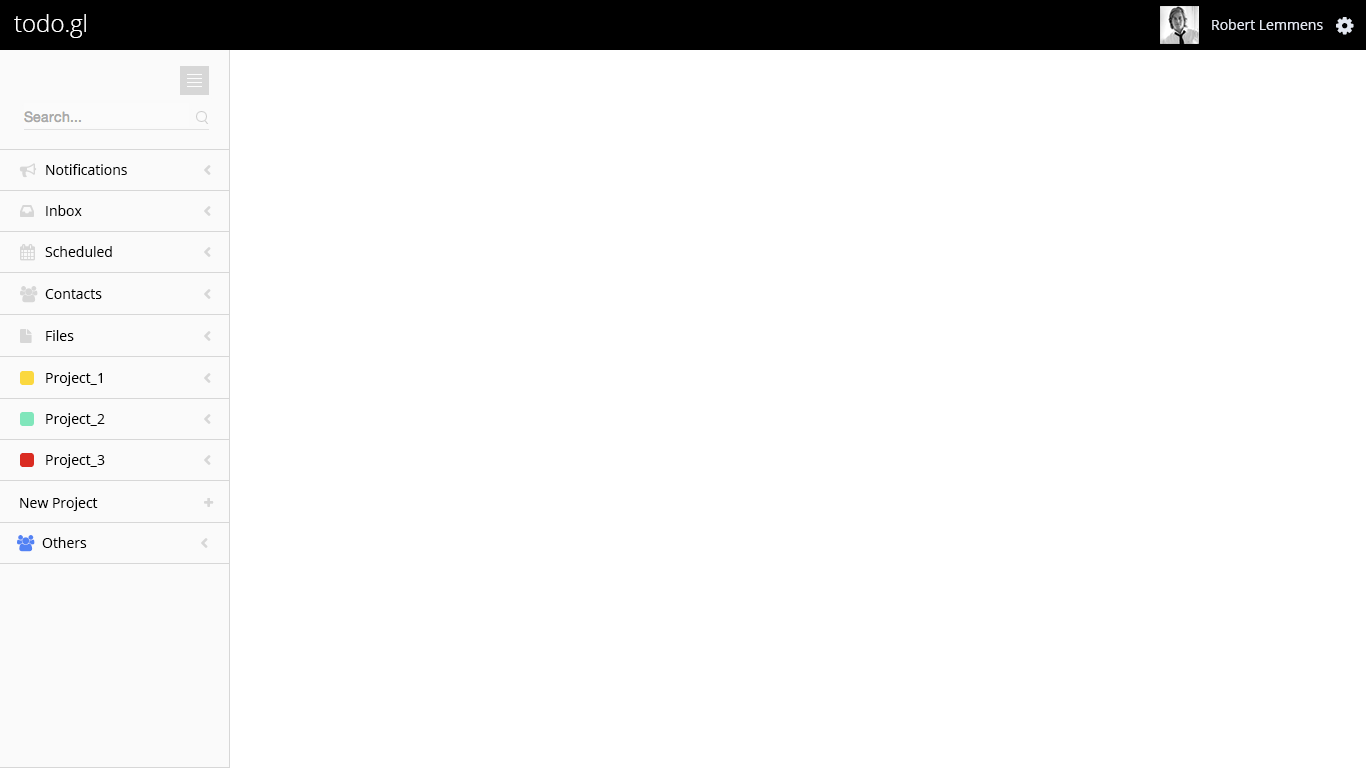
<style>
.page{position:relative;width:1366px;height:768px;background:#ffffff}
.page>*{position:absolute;margin:0}
.t1{font:24px "OpenSans-Light";color:#ffffff}
.t2{font:14px "OpenSans";color:#e2e6ef}
.t3{font:14px "OpenSans";color:#000000}
</style>
<div class="page">
<p class="t1" style="left:14px;top:14px;width:72px;height:24px">todo.gl</p>
<p class="t2" style="left:1212px;top:19px;width:111px;height:11px">Robert Lemmens</p>
<p class="t3" style="left:46px;top:164px;width:81px;height:11px">Notifications</p>
<p class="t3" style="left:46px;top:205px;width:36px;height:11px">Inbox</p>
<p class="t3" style="left:45px;top:246px;width:67px;height:11px">Scheduled</p>
<p class="t3" style="left:45px;top:289px;width:57px;height:10px">Contacts</p>
<p class="t3" style="left:46px;top:330px;width:28px;height:11px">Files</p>
<p class="t3" style="left:46px;top:372px;width:56px;height:14px">Project_1</p>
<p class="t3" style="left:46px;top:413px;width:59px;height:14px">Project_2</p>
<p class="t3" style="left:46px;top:454px;width:59px;height:14px">Project_3</p>
<p class="t3" style="left:20px;top:497px;width:78px;height:14px">New Project</p>
<p class="t3" style="left:42px;top:537px;width:45px;height:11px">Others</p>
</div>
